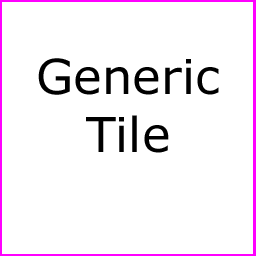
<style>
.page{position:relative;width:256px;height:256px;background:#ffffff}
.page>*{position:absolute;margin:0}
.t1{font:48px "Verdana";color:#000000}
</style>
<div class="page">
<p class="t1" style="left:38px;top:58px;width:181px;height:95px;text-align:center">Generic<br>Tile</p>
</div>
